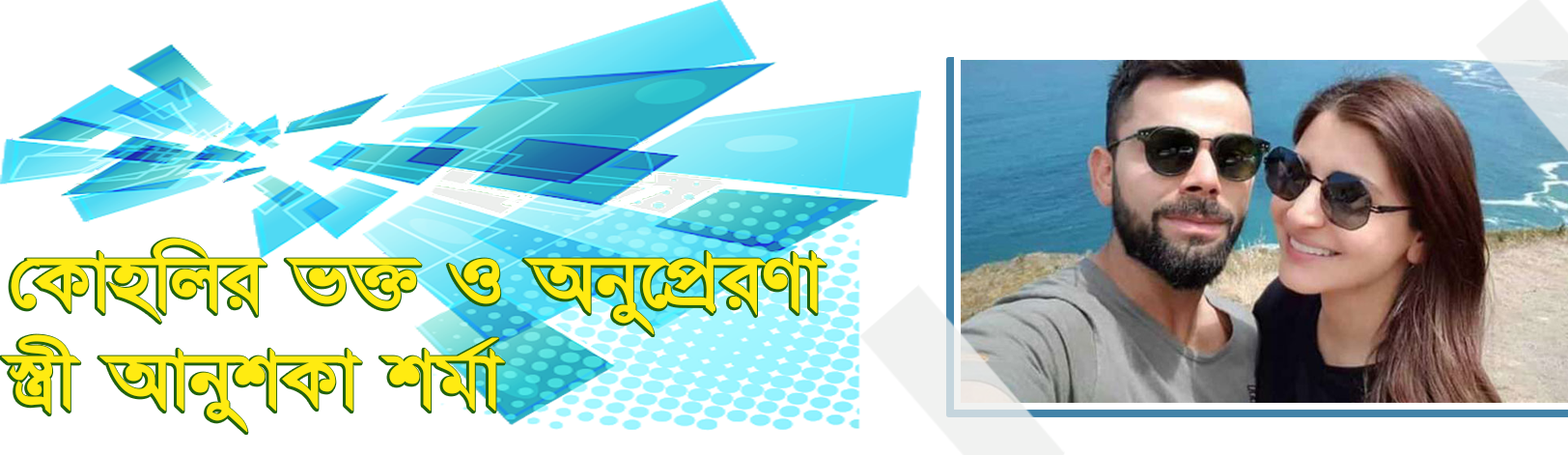
<style>
.page{position:relative;width:1568px;height:455px;background:#ffffff}
.page>*{position:absolute;margin:0}
.t1{font:94.8px/96.8px "ChondanaMJ-Bold";color:#ffeb11;font-weight:bold;scale:1.1 1}
</style>
<div class="page">
<p class="t1" style="left:1px;top:238px;width:825px;height:195px">†Kvnwji f³ I Aby‡cÖiYv<br>¯¿x AvbykKv kg©v</p>
</div>
